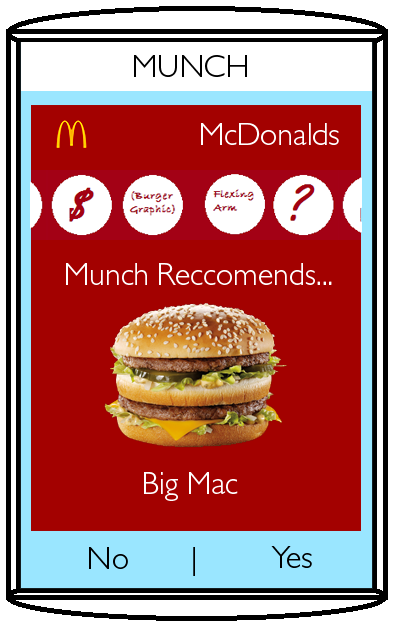
<style>
.page{position:relative;width:403px;height:634px;background:#a30100}
.page>*{position:absolute;margin:0}
.t1{font:32px "GillSansMTPro-Light";color:#000000}
.t2{font:32px "GillSansMTPro-Light";color:#ffffff}
</style>
<div class="page">
<p class="t1" style="left:134px;top:55px;width:113px;height:22px">MUNCH</p>
<p class="t2" style="left:201px;top:123px;width:138px;height:22px">McDonalds</p>
<p class="t2" style="left:66px;top:263px;width:266px;height:22px">Munch Reccomends...</p>
<p class="t2" style="left:144px;top:472px;width:94px;height:29px">Big Mac</p>
<p class="t1" style="left:89px;top:547px;width:39px;height:22px">No</p>
<p class="t1" style="left:193px;top:547px;width:2px;height:29px">|</p>
<p class="t1" style="left:271px;top:546px;width:41px;height:22px">Yes</p>
</div>
